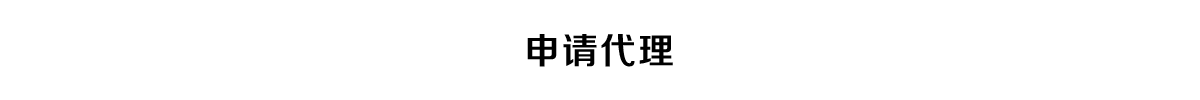
<style>
.page{position:relative;width:1200px;height:100px;background:#ffffff}
.page>*{position:absolute;margin:0}
.t1{font:36px "FZZZHONGJW--GB1-0";letter-spacing:0.06em;color:#000000;text-transform:uppercase}
</style>
<div class="page">
<p class="t1" style="left:527px;top:34px;width:146px;height:33px">申请代理</p>
</div>
